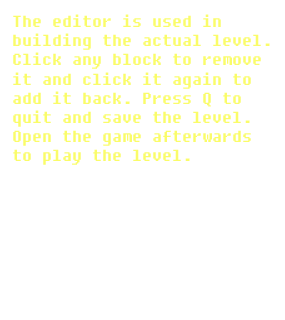
<style>
.page{position:relative;width:285px;height:320px;background:#ffffff}
.page>*{position:absolute;margin:0}
.t1{font:16px "Fixedsys";color:#fafc69}
</style>
<div class="page">
<p class="t1" style="left:13px;top:14px;width:257px;height:151px">The editor is used in<br>building the actual level. <br>Click any block to remove <br>it and click it again to <br>add it back. Press Q to <br>quit and save the level. <br>Open the game afterwards <br>to play the level.</p>
</div>
